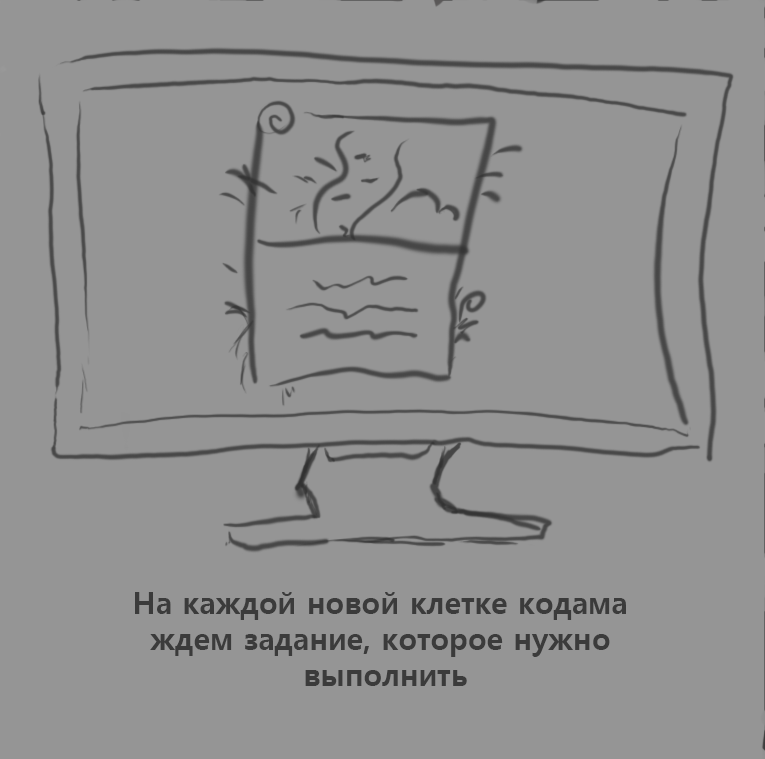
<style>
.page{position:relative;width:765px;height:759px;background:#959595}
.page>*{position:absolute;margin:0}
.t1{font:30px "MalgunGothicBold";color:#3b3b3b}
</style>
<div class="page">
<p class="t1" style="left:135px;top:592px;width:491px;height:94px;text-align:center">На каждой новой клетке кодама <br>ждем задание, которое нужно <br>выполнить</p>
</div>
